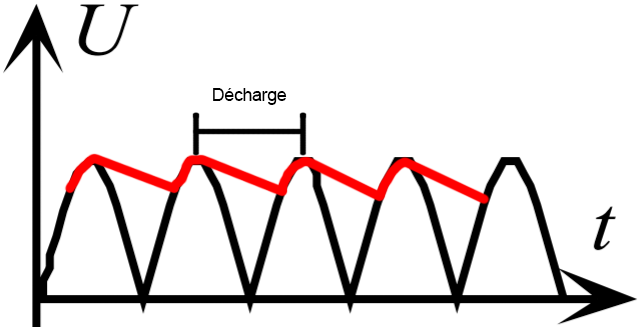
<style>
.page{position:relative;width:639px;height:327px;background:#ffffff}
.page>*{position:absolute;margin:0}
.t1{font:18px "ArialMT";letter-spacing:-0.025em;color:#000000}
</style>
<div class="page">
<p class="t1" style="left:213px;top:88px;width:74px;height:17px">Décharge</p>
</div>
